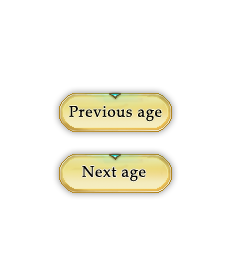
<style>
.page{position:relative;width:228px;height:272px;background:#ffffff}
.page>*{position:absolute;margin:0}
.t1{font:15.4px "BookAntiqua";letter-spacing:0.05em;color:#070502;scale:0.97 1}
</style>
<div class="page">
<p class="t1" style="left:69px;top:106px;width:93px;height:16px">Previous age</p>
<p class="t1" style="left:82px;top:166px;width:64px;height:16px">Next age</p>
</div>
